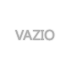
<style>
.page{position:relative;width:70px;height:70px;background:#ffffff}
.page>*{position:absolute;margin:0}
.t1{font:14px "SegoeUI";color:#b0b0b0}
</style>
<div class="page">
<p class="t1" style="left:15px;top:29px;width:40px;height:12px">VAZIO</p>
</div>
